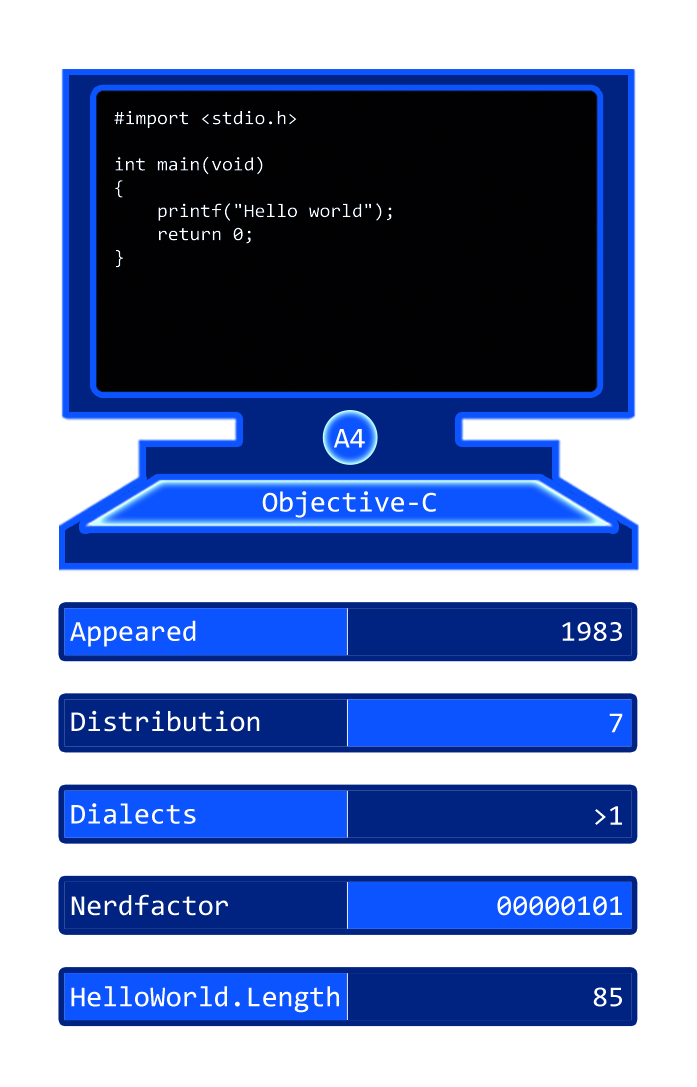
<style>
.page{position:relative;width:697px;height:1087px;background:#ffffff}
.page>*{position:absolute;margin:0}
.t1{font:19.3px "Consolas";color:#ffffff}
.t2{font:29px "Consolas";color:#ffffff}
</style>
<div class="page">
<p class="t1" style="left:114px;top:110px;width:278px;height:158px">#import &lt;stdio.h&gt;<br> <br>int main(void)<br>{<br>    printf("Hello world");<br>    return 0;<br>}</p>
<p class="t2" style="left:334px;top:429px;width:31px;height:19px">A4</p>
<p class="t2" style="left:262px;top:491px;width:174px;height:27px">Objective-C</p>
<p class="t2" style="left:70px;top:620px;width:126px;height:27px">Appeared</p>
<p class="t2" style="left:562px;top:622px;width:60px;height:19px">1983</p>
<p class="t2" style="left:71px;top:710px;width:189px;height:22px">Distribution</p>
<p class="t2" style="left:609px;top:713px;width:14px;height:20px">7</p>
<p class="t2" style="left:71px;top:803px;width:125px;height:21px">Dialects</p>
<p class="t2" style="left:595px;top:806px;width:27px;height:19px">&gt;1</p>
<p class="t2" style="left:71px;top:894px;width:157px;height:22px">Nerdfactor</p>
<p class="t2" style="left:497px;top:896px;width:125px;height:20px">00000101</p>
<p class="t2" style="left:71px;top:986px;width:268px;height:27px">HelloWorld.Length</p>
<p class="t2" style="left:593px;top:987px;width:29px;height:20px">85</p>
</div>
